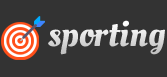
<style>
.page{position:relative;width:167px;height:77px;background:#333333}
.page>*{position:absolute;margin:0}
.t1{font:37px "OleoScript-Regular";color:#e0e0e0}
</style>
<div class="page">
<p class="t1" style="left:48px;top:20px;width:117px;height:35px">sporting</p>
</div>
